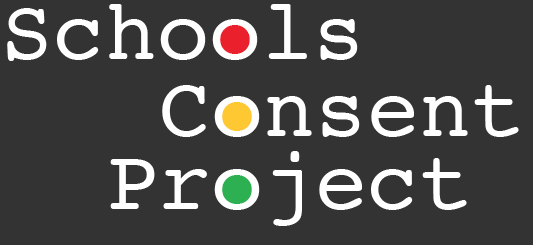
<style>
.page{position:relative;width:533px;height:245px;background:#333333}
.page>*{position:absolute;margin:0}
.t1{font:86.7px "Courier";color:#ffffff}
</style>
<div class="page">
<p class="t1" style="left:7px;top:4px;width:351px;height:57px">Schools</p>
<p class="t1" style="left:162px;top:85px;width:357px;height:52px">Consent</p>
<p class="t1" style="left:110px;top:151px;width:357px;height:75px">Project</p>
</div>
